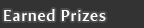
<style>
.page{position:relative;width:144px;height:28px;background:#333333}
.page>*{position:absolute;margin:0}
.t1{font:16px "AmiraParadiso";letter-spacing:0.05em;color:#ffffff}
</style>
<div class="page">
<p class="t1" style="left:4px;top:9px;width:102px;height:12px">Earned Prizes</p>
</div>
